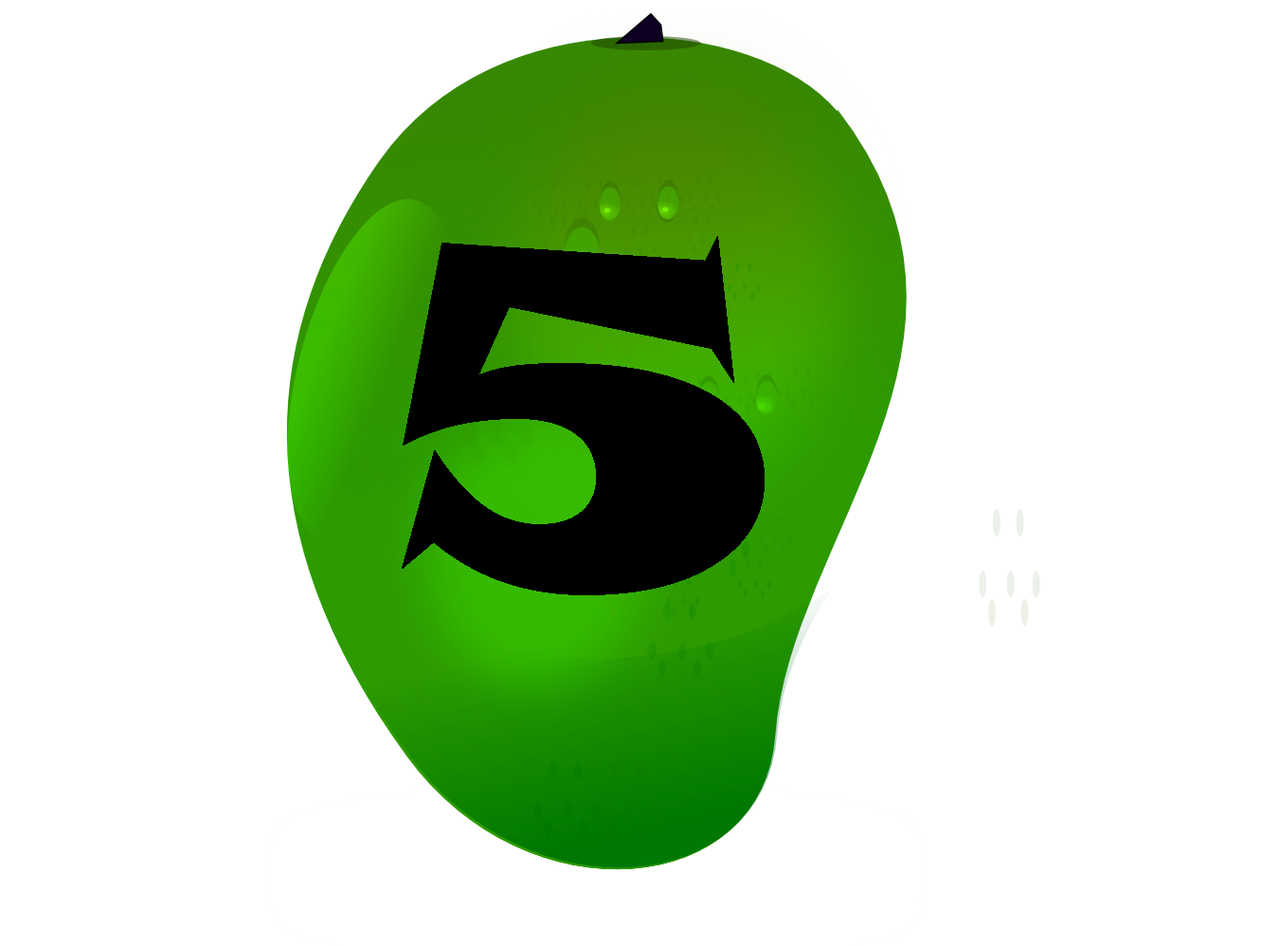
<style>
.page{position:relative;width:1261px;height:946px;background:#ffffff}
.page>*{position:absolute;margin:0}
.t1{font:473.7px "SnapITC-Regular";color:#000000}
</style>
<div class="page">
<p class="t1" style="left:402px;top:236px;width:363px;height:359px">5</p>
</div>
